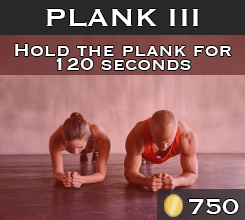
<style>
.page{position:relative;width:245px;height:220px}
.page>*{position:absolute;margin:0}
.t1{font:33.3px "Copperplate";color:#ffffff}
.t2{font:22.2px "Copperplate";color:#ffffff}
.t3{font:27.8px "Copperplate";color:#ffffff}
</style>
<div class="page">
<p class="t1" style="left:46px;top:9px;width:153px;height:18px">PLANK III</p>
<p class="t2" style="left:15px;top:44px;width:216px;height:26px">Hold the plank for 120 seconds</p>
<p class="t3" style="left:189px;top:199px;width:50px;height:15px">750</p>
</div>
